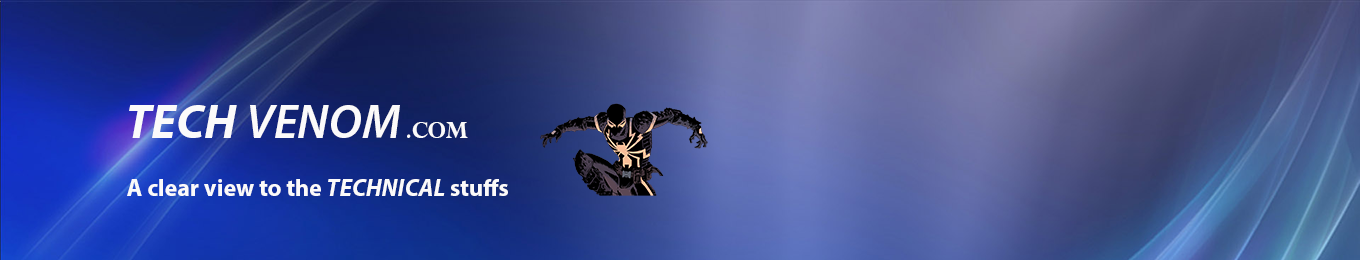
<style>
.page{position:relative;width:1360px;height:260px}
.page>*{position:absolute;margin:0}
.t1{font:24px "MyriadPro-Bold";color:#fbfafa}
.t2{font:60px "MyriadPro-Bold";color:#fbfafa}
.t3{font:48px "MyriadPro-BoldIt";color:#fbfafa}
.t4{font:48px "MyriadPro-SemiboldIt";color:#fbfafa}
.t5{font:22px "MyriadPro-SemiboldIt";color:#fbfafa}
.t6{font:22px "PerpetuaTitlingMT-Bold";color:#fbfafa}
.t7{font:24px "MyriadPro-BoldIt";color:#fbfafa}
</style>
<div class="page">
<p class="t1" style="left:127px;top:105px;width:381px;height:91px"><span class="t2">          <br>  </span><span class="t3">TECH </span><span class="t4">VENOM  </span><span class="t5">.</span><span class="t6">com</span> <br>      <br>               A clear view to the <span class="t7">TECHNICAL</span> stuffs</p>
</div>
